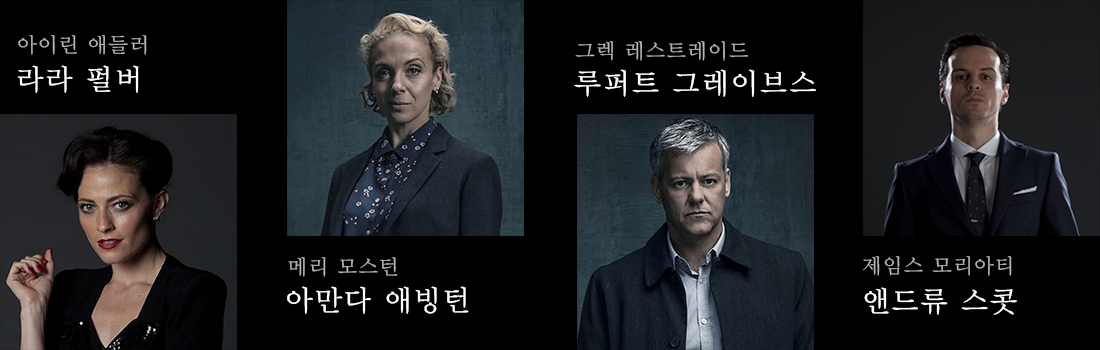
<style>
.page{position:relative;width:1100px;height:350px;background:#000000}
.page>*{position:absolute;margin:0}
.t1{font:20.8px "YDIYMjO120-KSCpc-EUC-H";color:#b5b5b5}
.t2{font:29.2px "YDIYMjO130-KSCpc-EUC-H";color:#ffffff}
.t3{font:20.9px "YDIYMjO120-KSCpc-EUC-H";color:#b5b5b5}
</style>
<div class="page">
<p class="t1" style="left:18px;top:35px;width:129px;height:20px">아이린 애들러</p>
<p class="t1" style="left:575px;top:41px;width:173px;height:20px">그렉 레스트레이드</p>
<p class="t2" style="left:17px;top:65px;width:122px;height:28px">라라 펄버</p>
<p class="t2" style="left:574px;top:69px;width:242px;height:28px">루퍼트 그레이브스</p>
<p class="t1" style="left:288px;top:257px;width:110px;height:20px">메리 모스턴</p>
<p class="t3" style="left:862px;top:256px;width:150px;height:20px">제임스 모리아티</p>
<p class="t2" style="left:287px;top:286px;width:182px;height:28px">아만다 애빙턴</p>
<p class="t2" style="left:864px;top:287px;width:153px;height:28px">앤드류 스콧</p>
</div>
